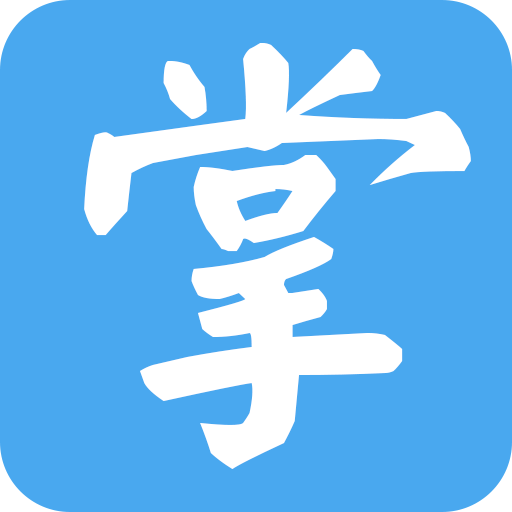
<style>
.page{position:relative;width:512px;height:512px;background:#49a8ef}
.page>*{position:absolute;margin:0}
.t1{font:500px "FashionFont052,by-www.6763.net";color:#ffffff;scale:1.07 1}
</style>
<div class="page">
<p class="t1" style="left:84px;top:43px;width:387px;height:426px">掌</p>
</div>
